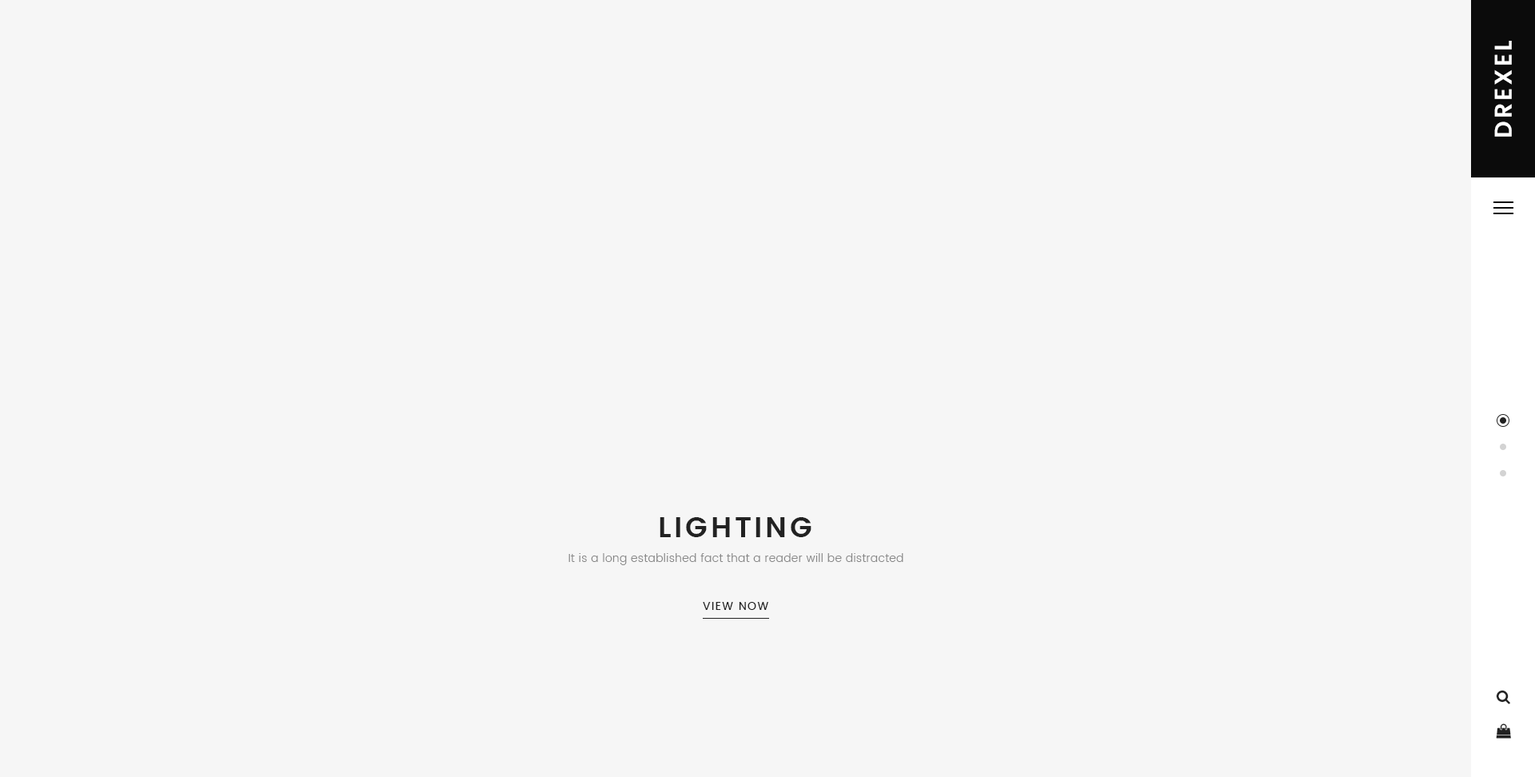
<style>
.page{position:relative;width:1535px;height:777px;background:#f6f6f6}
.page>*{position:absolute;margin:0}
.t1{font:24px "Poppins-SemiBold";letter-spacing:0.1em;color:#ffffff;text-transform:uppercase}
.t2{font:28.8px "Poppins-SemiBold";letter-spacing:0.1em;color:#222222;text-transform:uppercase}
.t3{font:11.2px "Poppins-Light";letter-spacing:0.025em;color:#888888}
.t4{font:11.2px "Poppins-Regular";letter-spacing:0.1em;color:#222222;text-transform:uppercase}
</style>
<div class="page">
<p class="t1" style="left:1494px;top:41px;width:18px;height:96px;rotate:-90deg">Drexel</p>
<p class="t2" style="left:659px;top:517px;width:152px;height:20px">Lighting</p>
<p class="t3" style="left:568px;top:553px;width:335px;height:12px">It is a long established fact that a reader will be distracted</p>
<p class="t4" style="left:703px;top:602px;width:65px;height:8px">View now</p>
</div>
